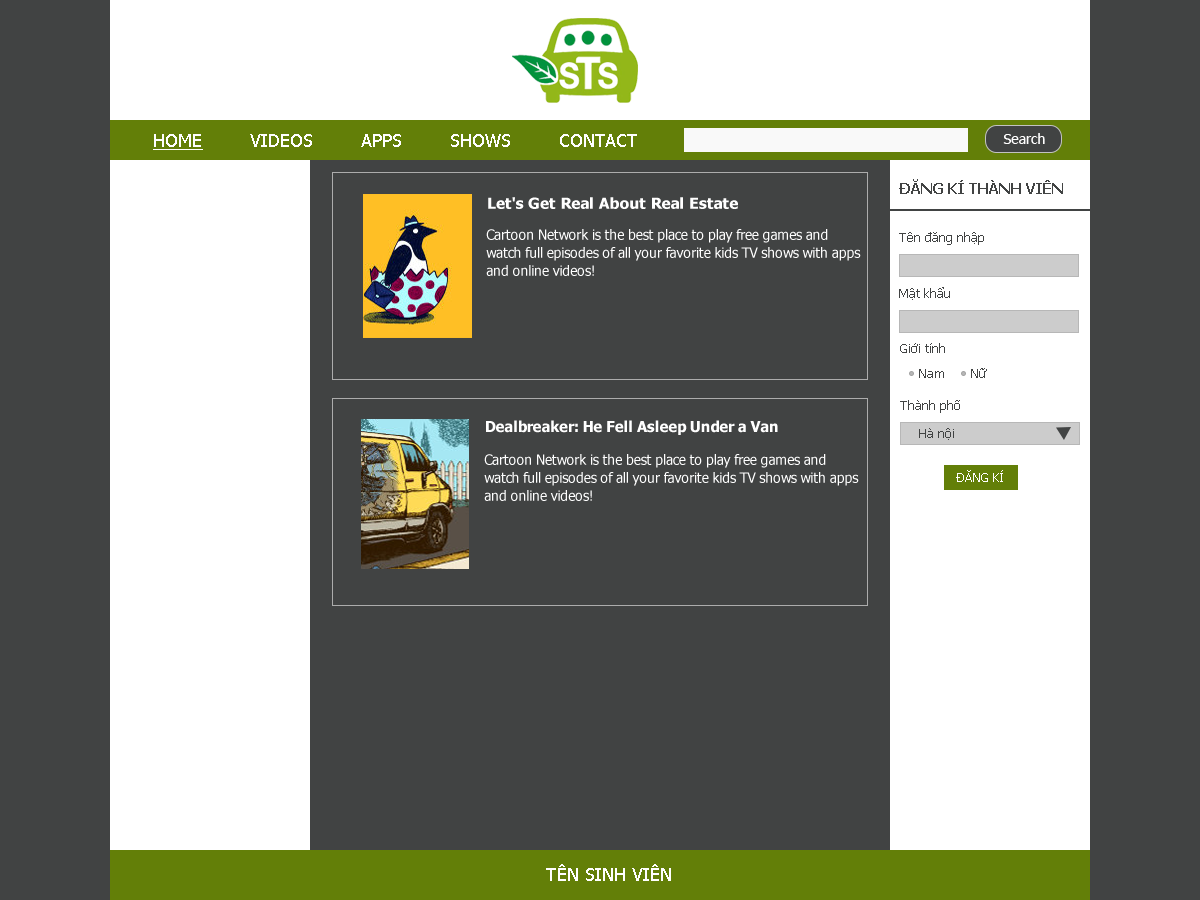
<style>
.page{position:relative;width:1200px;height:900px;background:#414343}
.page>*{position:absolute;margin:0}
.t1{font:18px "Tahoma";color:#ffffff}
.t2{font:18px "Tahoma";color:#ffffff;text-decoration:underline}
.t3{font:14px "Tahoma";color:#ffffff}
.t4{font:15px "Tahoma-Bold";color:#414343}
.t5{font:15px "Tahoma-Bold";letter-spacing:-0.01em;color:#ffffff;scale:1.04 1}
.t6{font:14px/18px "Tahoma";letter-spacing:-0.01em;color:#ffffff}
.t7{font:13px "Tahoma";color:#414343}
.t8{font:15px "Tahoma-Bold";letter-spacing:-0.01em;color:#ffffff}
.t9{font:13px "Tahoma";color:#ffffff}
</style>
<div class="page">
<p class="t1" style="left:153px;top:134px;width:484px;height:16px"><span class="t2">HOME</span>        VIDEOS        APPS        SHOWS        CONTACT</p>
<p class="t3" style="left:1003px;top:133px;width:42px;height:11px">Search</p>
<p class="t4" style="left:899px;top:179px;width:164px;height:15px">ĐĂNG KÍ THÀNH VIÊN</p>
<p class="t5" style="left:488px;top:197px;width:250px;height:12px">Let's Get Real About Real Estate</p>
<p class="t6" style="left:486px;top:229px;width:375px;height:47px">Cartoon Network is the best place to play free games and <br>watch full episodes of all your favorite kids TV shows with apps <br>and online videos!</p>
<p class="t7" style="left:899px;top:232px;width:85px;height:13px">Tên đăng nhập</p>
<p class="t7" style="left:899px;top:287px;width:51px;height:13px">Mật khẩu</p>
<p class="t7" style="left:900px;top:343px;width:45px;height:10px">Giới tính</p>
<p class="t7" style="left:919px;top:369px;width:25px;height:9px">Nam</p>
<p class="t7" style="left:971px;top:368px;width:16px;height:10px">Nữ</p>
<p class="t7" style="left:900px;top:400px;width:60px;height:13px">Thành phố</p>
<p class="t8" style="left:486px;top:420px;width:292px;height:15px">Dealbreaker: He Fell Asleep Under a Van</p>
<p class="t7" style="left:919px;top:428px;width:35px;height:12px">Hà nội</p>
<p class="t6" style="left:484px;top:454px;width:375px;height:47px">Cartoon Network is the best place to play free games and <br>watch full episodes of all your favorite kids TV shows with apps <br>and online videos!</p>
<p class="t9" style="left:956px;top:470px;width:47px;height:12px">ĐĂNG KÍ</p>
<p class="t1" style="left:546px;top:864px;width:125px;height:17px">TÊN SINH VIÊN</p>
</div>
